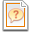
<style>
.page{position:relative;width:32px;height:32px;background:#ffffff}
.page>*{position:absolute;margin:0}
.t1{font:9px "Ebrima";letter-spacing:0.005em;color:#ffffff}
.t2{font:7.6px "ArialMT";letter-spacing:-0.005em;color:#ffffff;scale:1.2 1}
</style>
<div class="page">
<p class="t1" style="left:8px;top:22px;width:15px;height:6px">PPT</p>
<p class="t2" style="left:8px;top:22px;width:5px;height:6px">X</p>
</div>
